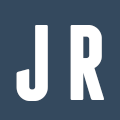
<style>
.page{position:relative;width:120px;height:120px;background:#34495e}
.page>*{position:absolute;margin:0}
.t1{font:106.6px "Franchise-Bold";color:#ffffff}
</style>
<div class="page">
<p class="t1" style="left:16px;top:25px;width:88px;height:76px">J R</p>
</div>
